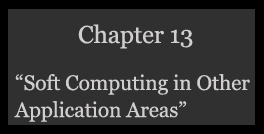
<style>
.page{position:relative;width:264px;height:134px;background:#313030}
.page>*{position:absolute;margin:0}
.t1{font:24.5px "Georgia";letter-spacing:-0.005em;color:#d0cece}
.t2{font:21px/9px "Georgia";letter-spacing:-0.005em;color:#d0cece}
</style>
<div class="page">
<p class="t1" style="left:78px;top:24px;width:115px;height:25px">Chapter 13</p>
<p class="t2" style="left:14px;top:74px;width:236px;height:48px">“Soft Computing in Other<br><br><br>Application Areas”</p>
</div>
